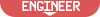
<style>
.page{position:relative;width:100px;height:17px;background:#da5656}
.page>*{position:absolute;margin:0}
.t1{font:15px "GlassGauge";color:#ffffff}
</style>
<div class="page">
<p class="t1" style="left:22px;top:1px;width:58px;height:10px">ENGINEER</p>
</div>
